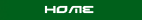
<style>
.page{position:relative;width:142px;height:20px;background:#00601b}
.page>*{position:absolute;margin:0}
.t1{font:12px "Battlefield";color:#ffffff}
</style>
<div class="page">
<p class="t1" style="left:44px;top:5px;width:50px;height:9px">home</p>
</div>
